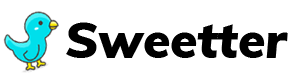
<style>
.page{position:relative;width:300px;height:80px;background:#ffffff}
.page>*{position:absolute;margin:0}
.t1{font:50px "Muli-BlackItalic";color:#000000}
</style>
<div class="page">
<p class="t1" style="left:66px;top:22px;width:222px;height:36px">Sweetter</p>
</div>
